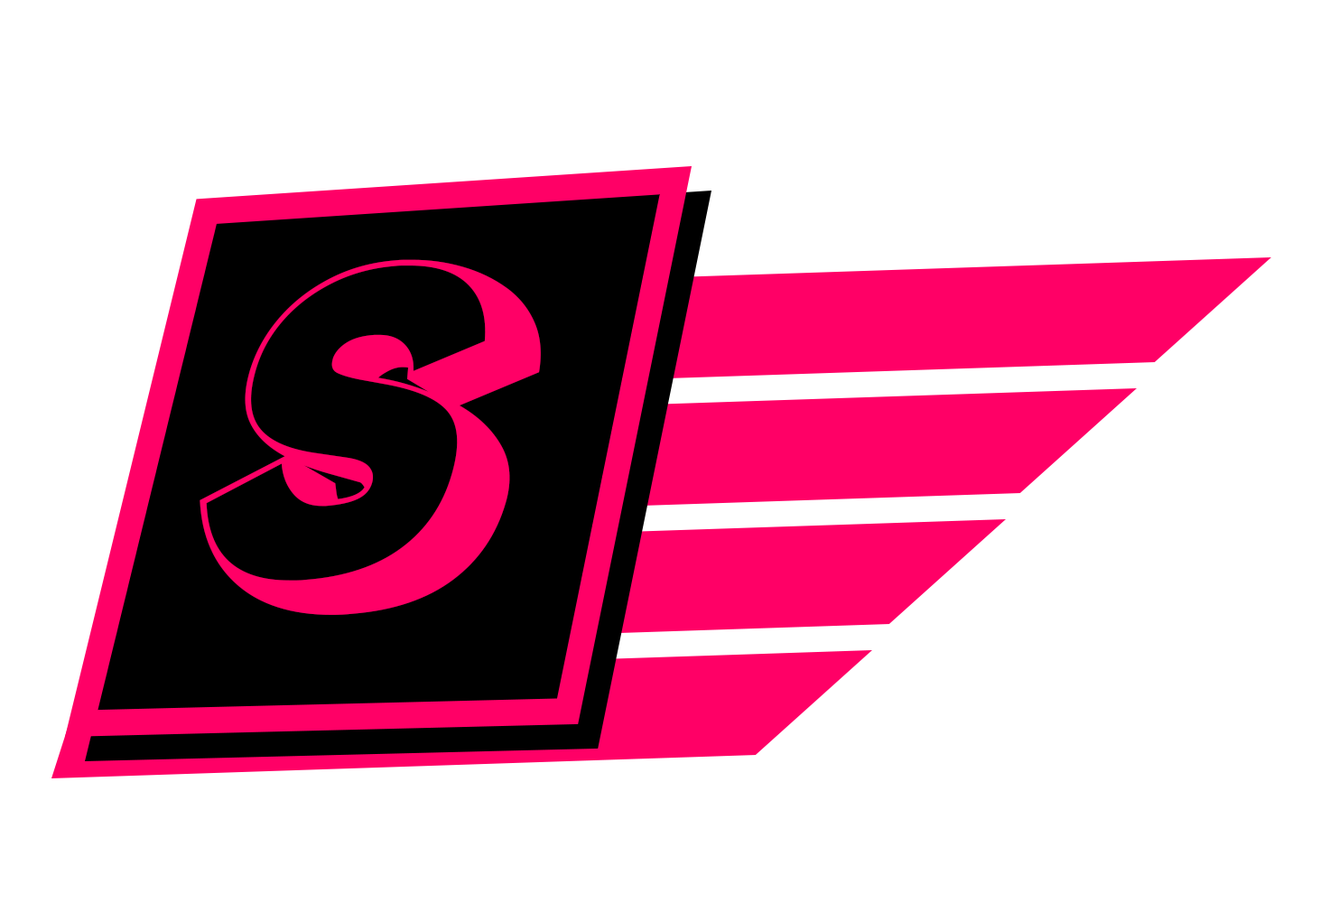
<style>
.page{position:relative;width:1320px;height:903px;background:#ffffff}
.page>*{position:absolute;margin:0}
.t1{font:587.7px "RampartOne-Regular";color:#ff0066;scale:0.96 1}
</style>
<div class="page">
<p class="t1" style="left:200px;top:259px;width:341px;height:356px">s</p>
</div>
